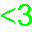
<style>
.page{position:relative;width:32px;height:32px;background:#ffffff}
.page>*{position:absolute;margin:0}
.t1{font:30px "MicrosoftSansSerif";letter-spacing:-0.05em;color:#00ff00}
</style>
<div class="page">
<p class="t1" style="left:1px;top:4px;width:31px;height:22px">&lt;3</p>
</div>
